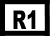
<style>
.page{position:relative;width:50px;height:36px;background:#000000}
.page>*{position:absolute;margin:0}
.t1{font:26px "Arial-Black";color:#000000;scale:0.69 1}
</style>
<div class="page">
<p class="t1" style="left:13px;top:10px;width:23px;height:19px">R1</p>
</div>
